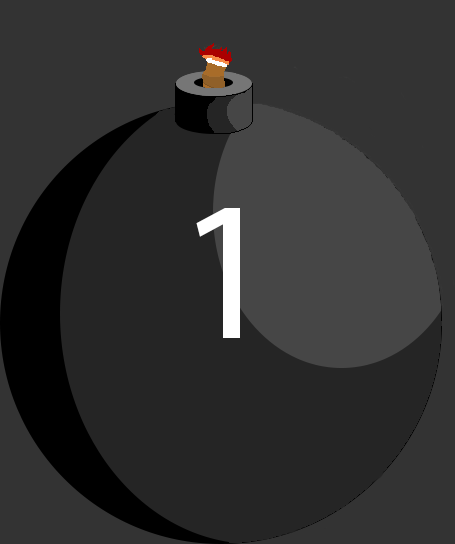
<style>
.page{position:relative;width:455px;height:544px;background:#333333}
.page>*{position:absolute;margin:0}
.t1{font:200px "MyriadPro-Regular";color:#ffffff}
</style>
<div class="page">
<p class="t1" style="left:196px;top:208px;width:44px;height:130px">1</p>
</div>
